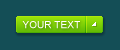
<style>
.page{position:relative;width:120px;height:50px;background:#144e56}
.page>*{position:absolute;margin:0}
.t1{font:10px "ArialMT";color:#ffffff;text-transform:uppercase}
</style>
<div class="page">
<p class="t1" style="left:22px;top:21px;width:58px;height:8px">your text</p>
</div>
